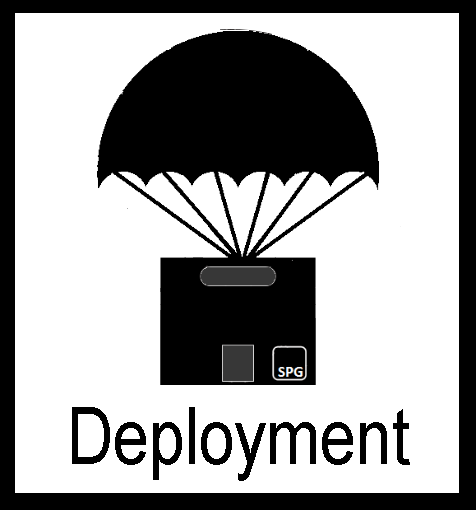
<style>
.page{position:relative;width:476px;height:510px;background:#ffffff}
.page>*{position:absolute;margin:0}
.t1{font:79.3px "ArialNarrow";letter-spacing:-0.005em;color:#000000}
</style>
<div class="page">
<p class="t1" style="left:72px;top:407px;width:338px;height:74px">Deployment</p>
</div>
